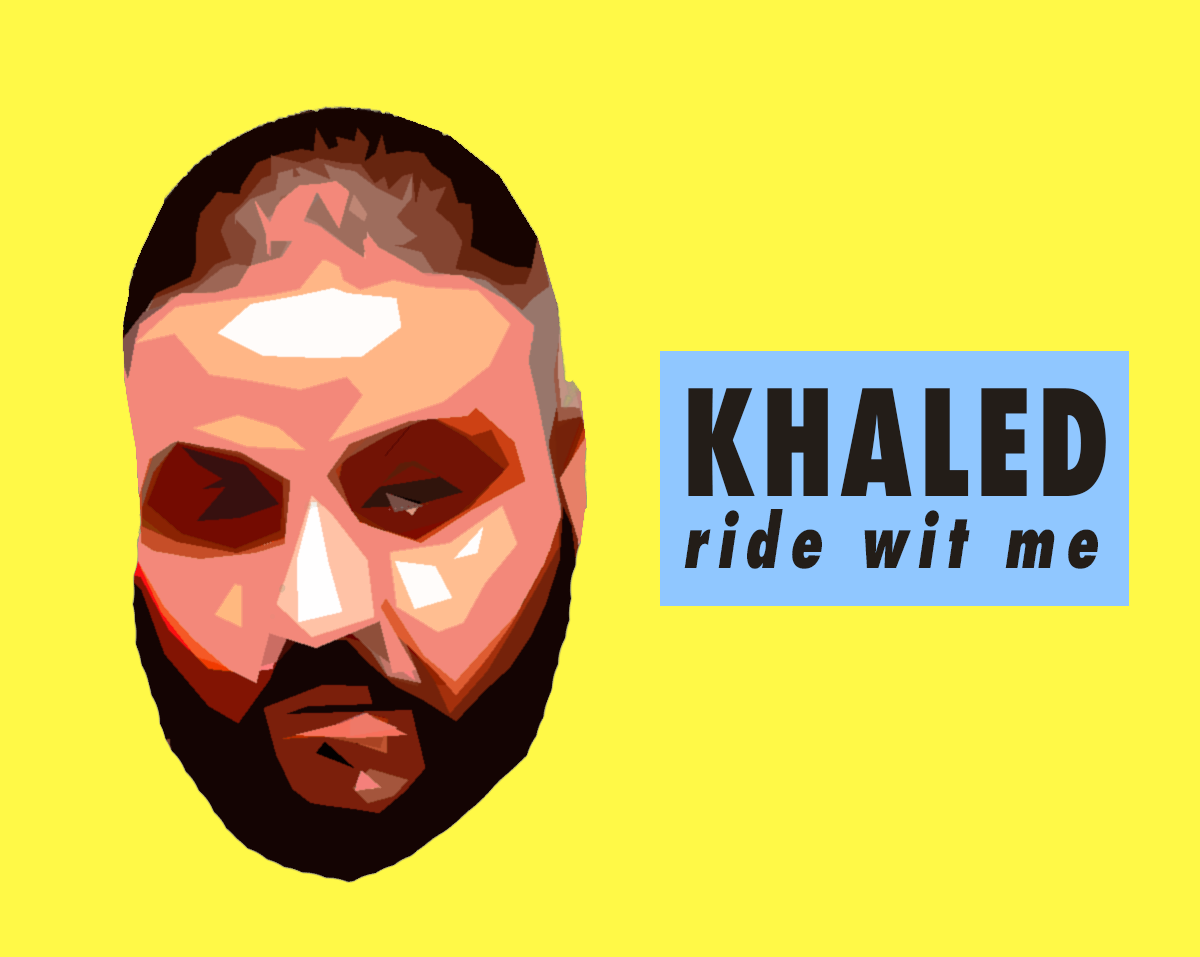
<style>
.page{position:relative;width:1200px;height:957px;background:#fff947}
.page>*{position:absolute;margin:0}
.t1{font:71.4px "Futura-CondensedExtraBold";letter-spacing:0.175em;color:#231d18;font-style:italic;scale:0.84 1}
.t2{font:142.8px "Futura-CondensedExtraBold";letter-spacing:0.05em;color:#231d18;scale:0.84 1}
</style>
<div class="page">
<p class="t1" style="left:684px;top:388px;width:422px;height:181px"><span class="t2">KHALED<br></span>ride wit me</p>
</div>
